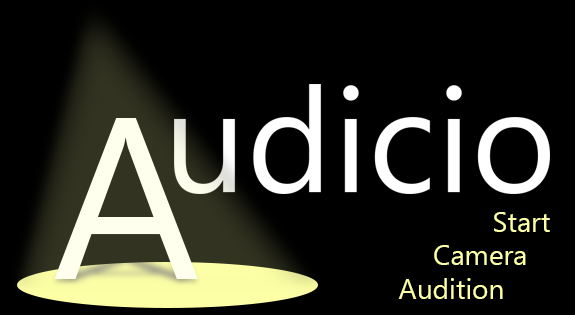
<style>
.page{position:relative;width:575px;height:315px;background:#000000}
.page>*{position:absolute;margin:0}
.t1{font:28px "MyanmarText";color:#fcffa5}
</style>
<div class="page">
<p class="t1" style="left:398px;top:212px;width:152px;height:87px;text-align:right">Start<br>Camera   <br>Audition</p>
</div>
